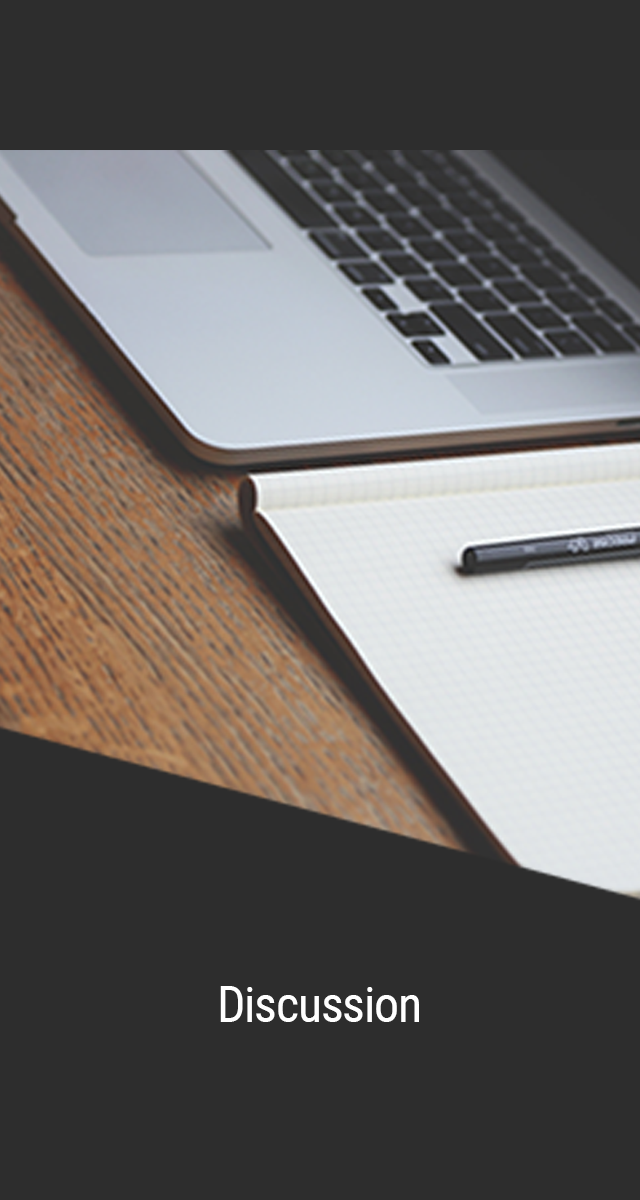
<style>
.page{position:relative;width:640px;height:1200px;background:#2d2d2d}
.page>*{position:absolute;margin:0}
.t1{font:50px "RobotoCondensed-Regular";letter-spacing:-0.025em;color:#ffffff}
</style>
<div class="page">
<p class="t1" style="left:220px;top:986px;width:199px;height:36px">Discussion</p>
</div>
